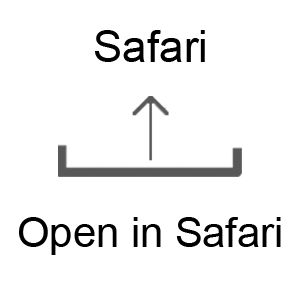
<style>
.page{position:relative;width:300px;height:300px;background:#ffffff}
.page>*{position:absolute;margin:0}
.t1{font:44px "ArialMT";color:#000000}
.t2{font:41.7px "ArialMT";color:#000000}
</style>
<div class="page">
<p class="t1" style="left:95px;top:30px;width:110px;height:32px">Safari</p>
<p class="t2" style="left:19px;top:217px;width:262px;height:38px">Open in Safari</p>
</div>
